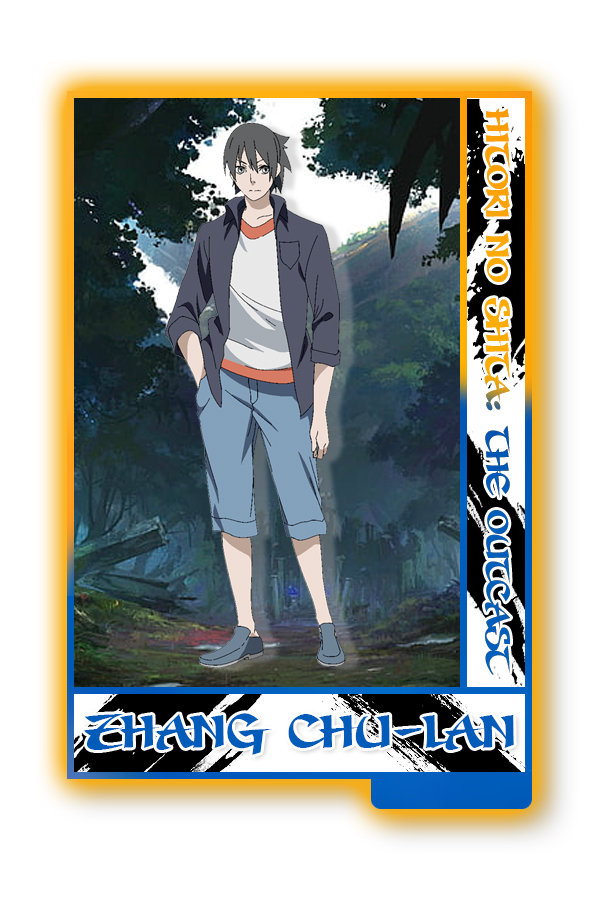
<style>
.page{position:relative;width:600px;height:900px;background:#ffffff}
.page>*{position:absolute;margin:0}
.t1{font:36.7px "SevenSwordsmenBB"}
.t2{font:53.7px "SevenSwordsmenBB";color:#005bb9}
</style>
<div class="page">
<p class="t1" style="left:483px;top:108px;width:28px;height:567px;rotate:90deg">HITORI NO SHITA: THE OUTCAST</p>
<p class="t2" style="left:83px;top:713px;width:431px;height:42px">Zhang Chu-Lan</p>
</div>
